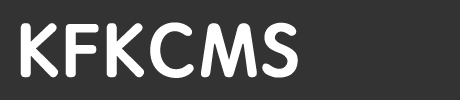
<style>
.page{position:relative;width:460px;height:100px;background:#333333}
.page>*{position:absolute;margin:0}
.t1{font:75px "STYuanti-SC-Bold";letter-spacing:0.04em;color:#ffffff}
</style>
<div class="page">
<p class="t1" style="left:20px;top:22px;width:278px;height:56px">KFKCMS</p>
</div>
